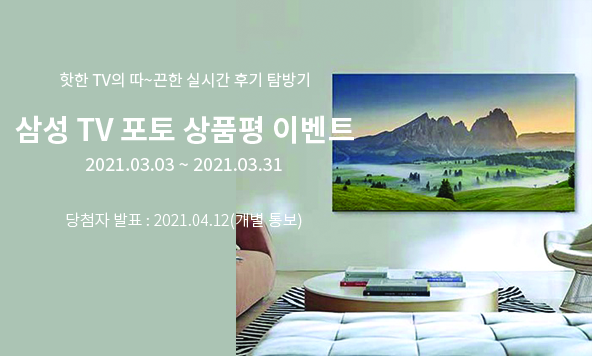
<style>
.page{position:relative;width:592px;height:356px;background:#abc4b4}
.page>*{position:absolute;margin:0}
.t1{font:16px "NotoSansKR-Regular";color:#ffffff}
.t2{font:30px "NotoSansKR-Bold";color:#ffffff}
.t3{font:18px "NotoSansKR-Regular";color:#ffffff}
.t4{font:16px "NotoSansKR-Light";color:#ffffff}
</style>
<div class="page">
<p class="t1" style="left:60px;top:72px;width:249px;height:16px">핫한 TV의 따~끈한 실시간 후기 탐방기</p>
<p class="t2" style="left:15px;top:115px;width:339px;height:29px">삼성 TV 포토 상품평 이벤트</p>
<p class="t3" style="left:86px;top:158px;width:196px;height:13px">2021.03.03 ~ 2021.03.31</p>
<p class="t4" style="left:66px;top:212px;width:236px;height:18px">당첨자 발표 : 2021.04.12(개별 통보)</p>
</div>
